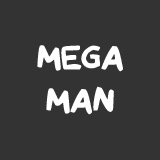
<style>
.page{position:relative;width:160px;height:160px;background:#333333}
.page>*{position:absolute;margin:0}
.t1{font:35.9px "QAReports";color:#ffffff}
</style>
<div class="page">
<p class="t1" style="left:37px;top:45px;width:86px;height:70px;text-align:center">MEGA<br>MAN</p>
</div>
